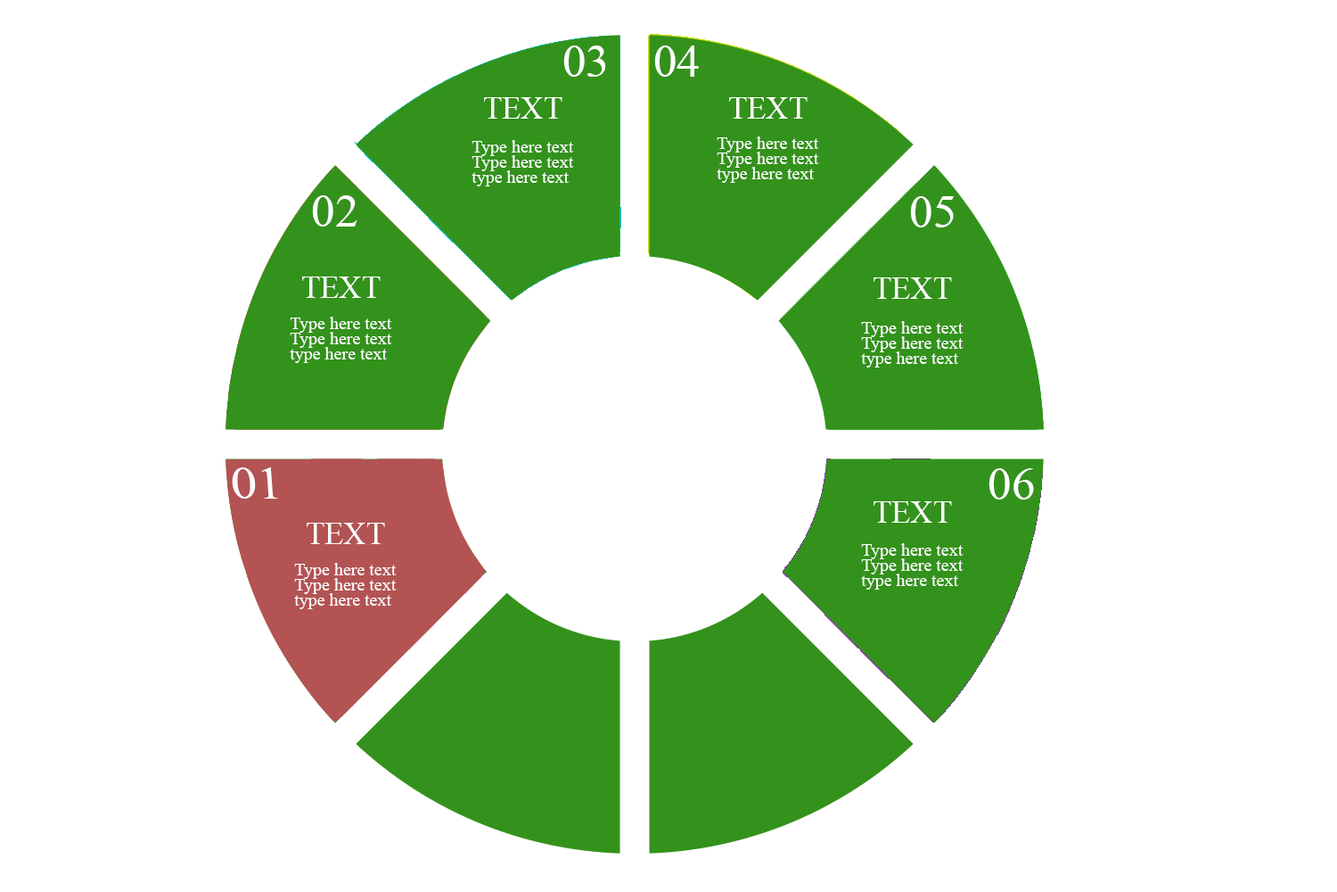
<style>
.page{position:relative;width:1337px;height:892px;background:#ffffff}
.page>*{position:absolute;margin:0}
.t1{font:47.3px "TimesNewRomanPSMT";color:#ffffff}
.t2{font:31.2px "TimesNewRomanPSMT";color:#ffffff}
.t3{font:17.8px/15.2px "TimesNewRomanPSMT";color:#ffffff}
.t4{font:47.3px "TimesNewRomanPSMT";color:#ffffff;scale:1.11 1}
</style>
<div class="page">
<p class="t1" style="left:563px;top:45px;width:43px;height:32px">03</p>
<p class="t1" style="left:654px;top:45px;width:45px;height:32px">04</p>
<p class="t2" style="left:484px;top:97px;width:79px;height:22px">TEXT</p>
<p class="t2" style="left:729px;top:97px;width:79px;height:22px">TEXT</p>
<p class="t3" style="left:717px;top:136px;width:102px;height:47px">Type here text<br>Type here text<br>type here text</p>
<p class="t3" style="left:472px;top:140px;width:102px;height:46px">Type here text<br>Type here text<br>type here text</p>
<p class="t1" style="left:312px;top:195px;width:46px;height:31px">02</p>
<p class="t1" style="left:910px;top:196px;width:44px;height:31px">05</p>
<p class="t2" style="left:302px;top:276px;width:79px;height:22px">TEXT</p>
<p class="t2" style="left:874px;top:277px;width:78px;height:22px">TEXT</p>
<p class="t3" style="left:290px;top:317px;width:102px;height:46px">Type here text<br>Type here text<br>type here text</p>
<p class="t3" style="left:861px;top:321px;width:103px;height:46px">Type here text<br>Type here text<br>type here text</p>
<p class="t4" style="left:232px;top:467px;width:46px;height:31px">01</p>
<p class="t1" style="left:989px;top:468px;width:45px;height:31px">06</p>
<p class="t2" style="left:874px;top:501px;width:78px;height:21px">TEXT</p>
<p class="t2" style="left:307px;top:522px;width:78px;height:22px">TEXT</p>
<p class="t3" style="left:861px;top:543px;width:103px;height:46px">Type here text<br>Type here text<br>type here text</p>
<p class="t3" style="left:294px;top:563px;width:103px;height:46px">Type here text<br>Type here text<br>type here text</p>
</div>
